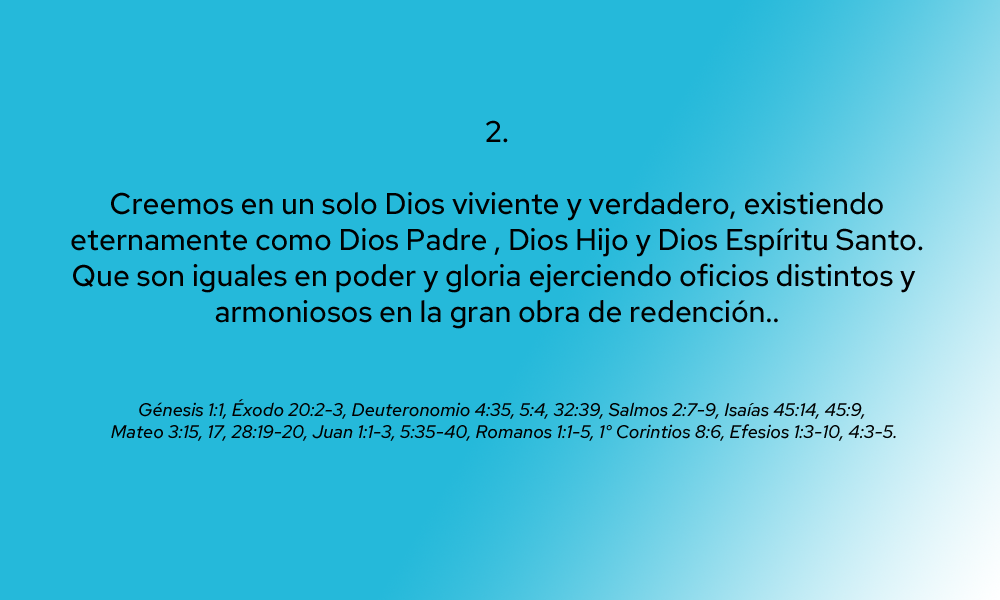
<style>
.page{position:relative;width:1000px;height:600px;background:#25b9da}
.page>*{position:absolute;margin:0}
.t1{font:30px "RosaSans-Regular";color:#000000}
.t2{font:18.3px "RosaSans-Italic";color:#000000}
</style>
<div class="page">
<p class="t1" style="left:71px;top:120px;width:852px;height:209px;text-align:center">2.<br><br>Creemos en un solo Dios viviente y verdadero, existiendo<br>eternamente como Dios Padre , Dios Hijo y Dios Espíritu Santo.<br>Que son iguales en poder y gloria ejerciendo oficios distintos y <br>armoniosos en la gran obra de redención..</p>
<p class="t2" style="left:111px;top:399px;width:785px;height:42px;text-align:center">Génesis 1:1, Éxodo 20:2-3, Deuteronomio 4:35, 5:4, 32:39, Salmos 2:7-9, Isaías 45:14, 45:9, <br>Mateo 3:15, 17, 28:19-20, Juan 1:1-3, 5:35-40, Romanos 1:1-5, 1° Corintios 8:6, Efesios 1:3-10, 4:3-5.</p>
</div>
